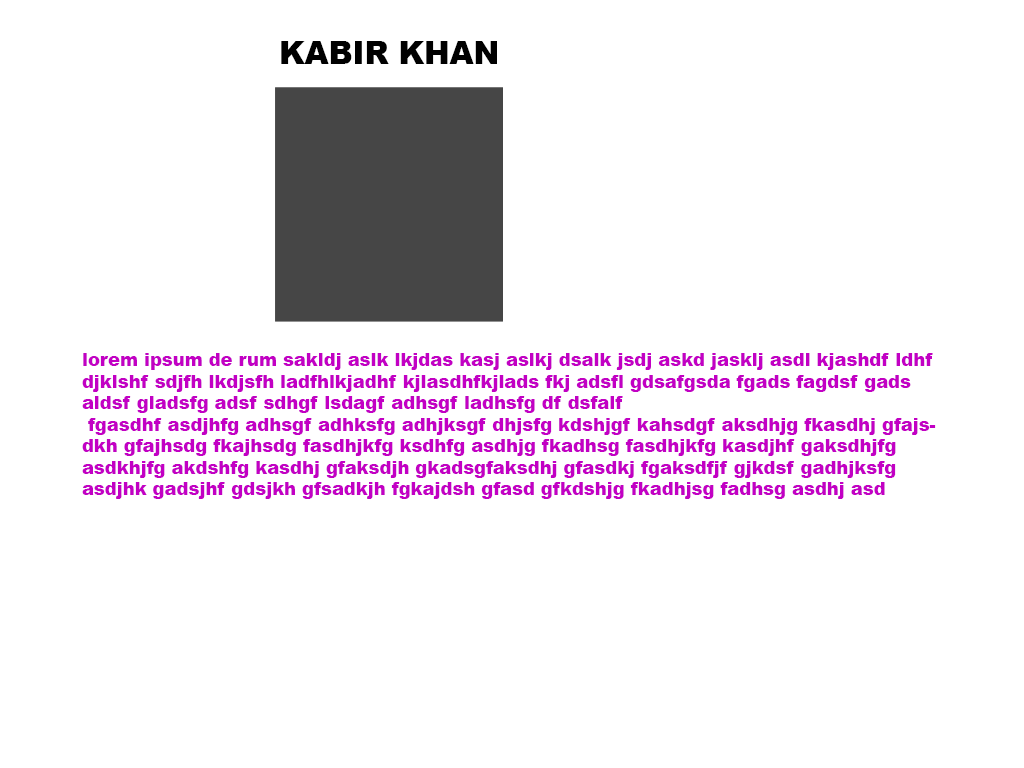
<style>
.page{position:relative;width:1024px;height:768px;background:#ffffff}
.page>*{position:absolute;margin:0}
.t1{font:30.7px "Arial-Black";color:#000000}
.t2{font:17.9px "Arial-Black";color:#c200c4}
</style>
<div class="page">
<p class="t1" style="left:281px;top:41px;width:216px;height:23px">KABIR KHAN</p>
<p class="t2" style="left:82px;top:353px;width:854px;height:146px">lorem ipsum de rum sakldj aslk lkjdas kasj aslkj dsalk jsdj askd jasklj asdl kjashdf ldhf djklshf sdjfh lkdjsfh ladfhlkjadhf kjlasdhfkjlads fkj adsfl gdsafgsda fgads fagdsf gads aldsf gladsfg adsf sdhgf lsdagf adhsgf ladhsfg df dsfalf<br> fgasdhf asdjhfg adhsgf adhksfg adhjksgf dhjsfg kdshjgf kahsdgf aksdhjg fkasdhj gfajsdkh gfajhsdg fkajhsdg fasdhjkfg ksdhfg asdhjg fkadhsg fasdhjkfg kasdjhf gaksdhjfg asdkhjfg akdshfg kasdhj gfaksdjh gkadsgfaksdhj gfasdkj fgaksdfjf gjkdsf gadhjksfg asdjhk gadsjhf gdsjkh gfsadkjh fgkajdsh gfasd gfkdshjg fkadhjsg fadhsg asdhj asd</p>
</div>
